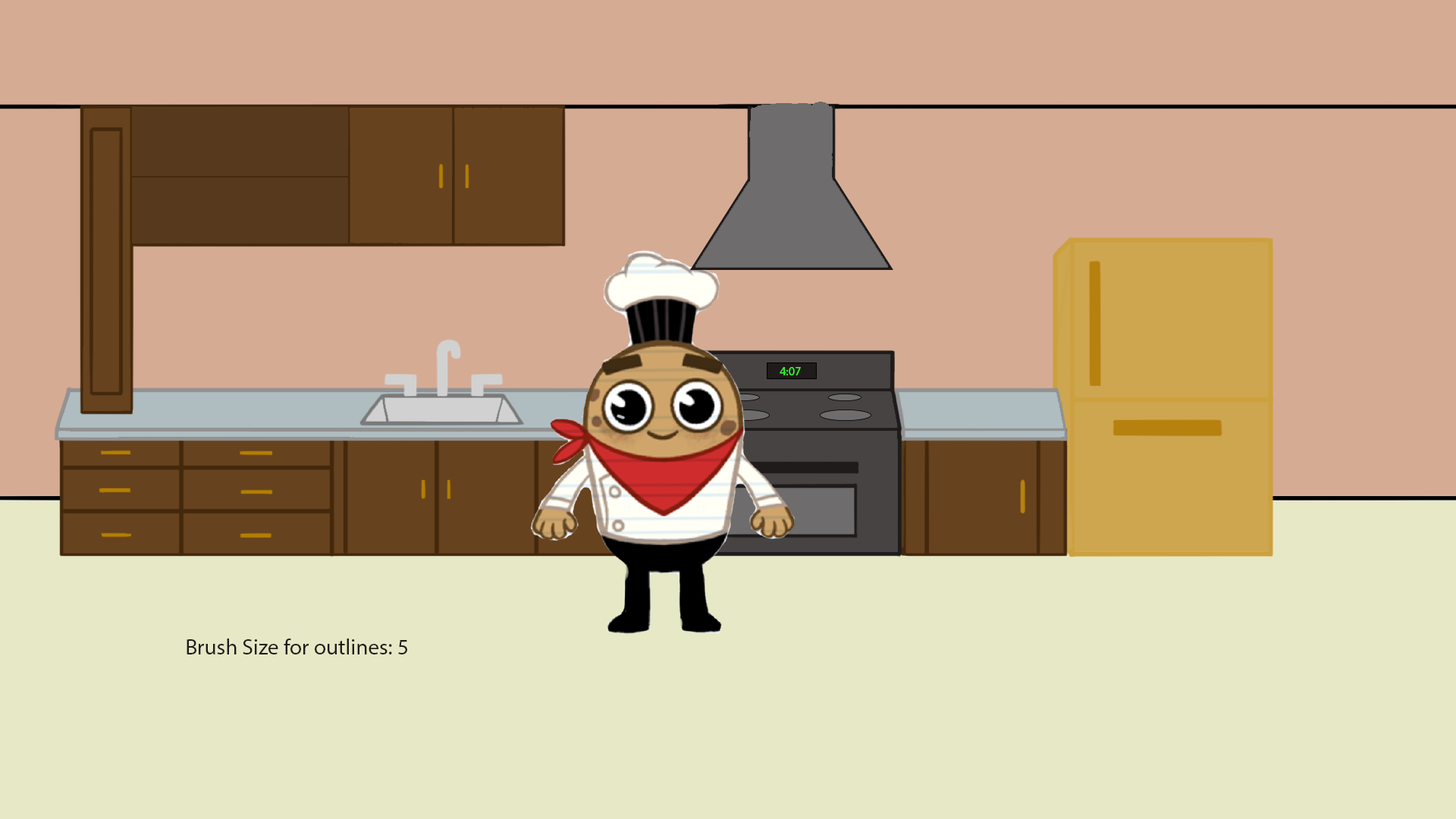
<style>
.page{position:relative;width:1456px;height:819px;background:#d6ab94}
.page>*{position:absolute;margin:0}
.t1{font:22.1px "MyriadPro-Regular";color:#1f1b1b}
</style>
<div class="page">
<p class="t1" style="left:187px;top:639px;width:220px;height:15px">Brush Size for outlines: 5</p>
</div>
